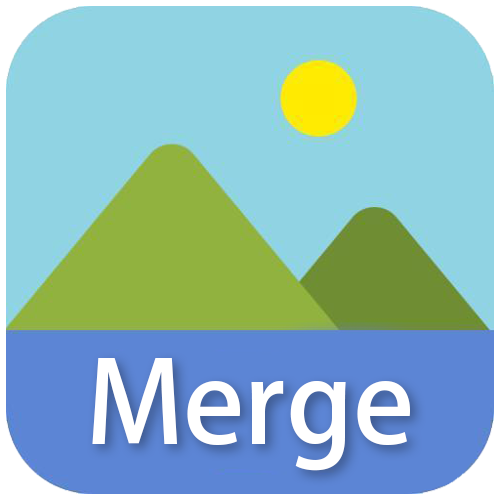
<style>
.page{position:relative;width:500px;height:500px;background:#90d3e3}
.page>*{position:absolute;margin:0}
.t1{font:112.3px "AdobeHeitiStd-Regular";color:#ffffff}
</style>
<div class="page">
<p class="t1" style="left:92px;top:358px;width:318px;height:113px">Merge</p>
</div>
